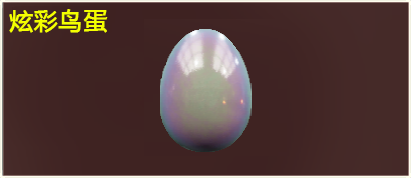
<style>
.page{position:relative;width:411px;height:178px}
.page>*{position:absolute;margin:0}
.t1{font:24px "MicrosoftYaHeiUI";color:#f4ff00;font-weight:bold}
</style>
<div class="page">
<p class="t1" style="left:9px;top:9px;width:99px;height:24px">炫彩鸟蛋</p>
</div>
